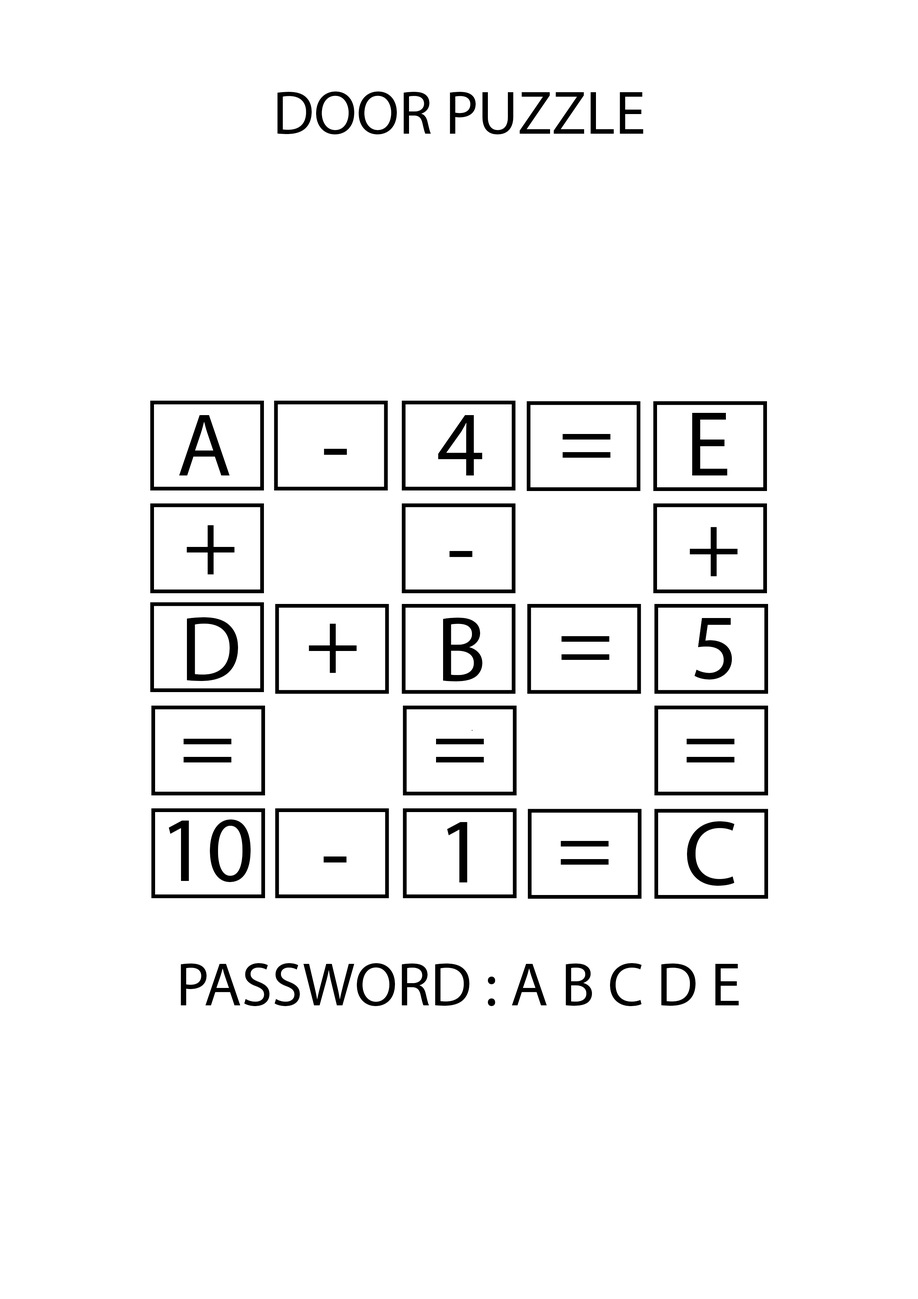
<style>
.page{position:relative;width:918px;height:1299px;background:#ffffff}
.page>*{position:absolute;margin:0}
.t1{font:61.7px "MyriadPro-Regular";color:#000000}
.t2{font:92.6px "MyriadPro-Regular";color:#000000}
.t3{font:89.5px "MyriadPro-Regular";color:#000000}
</style>
<div class="page">
<p class="t1" style="left:277px;top:91px;width:366px;height:43px">DOOR PUZZLE</p>
<p class="t2" style="left:692px;top:413px;width:35px;height:62px">E</p>
<p class="t3" style="left:179px;top:415px;width:51px;height:60px">A</p>
<p class="t2" style="left:438px;top:415px;width:44px;height:60px">4</p>
<p class="t2" style="left:563px;top:434px;width:47px;height:24px">=</p>
<p class="t2" style="left:324px;top:449px;width:23px;height:6px">-</p>
<p class="t2" style="left:187px;top:525px;width:48px;height:50px">+</p>
<p class="t2" style="left:690px;top:527px;width:48px;height:49px">+</p>
<p class="t2" style="left:449px;top:551px;width:23px;height:6px">-</p>
<p class="t2" style="left:187px;top:617px;width:51px;height:64px">D</p>
<p class="t2" style="left:443px;top:618px;width:39px;height:63px">B</p>
<p class="t2" style="left:695px;top:618px;width:37px;height:61px">5</p>
<p class="t2" style="left:309px;top:623px;width:48px;height:50px">+</p>
<p class="t2" style="left:562px;top:636px;width:47px;height:24px">=</p>
<p class="t2" style="left:184px;top:739px;width:47px;height:23px">=</p>
<p class="t2" style="left:436px;top:739px;width:48px;height:23px">=</p>
<p class="t2" style="left:687px;top:739px;width:48px;height:23px">=</p>
<p class="t2" style="left:169px;top:819px;width:82px;height:63px">10</p>
<p class="t2" style="left:447px;top:822px;width:21px;height:60px">1</p>
<p class="t2" style="left:687px;top:821px;width:48px;height:65px">C</p>
<p class="t2" style="left:561px;top:841px;width:48px;height:23px">=</p>
<p class="t2" style="left:324px;top:856px;width:23px;height:7px">-</p>
<p class="t1" style="left:181px;top:963px;width:558px;height:43px">PASSWORD : A B C D E</p>
</div>
